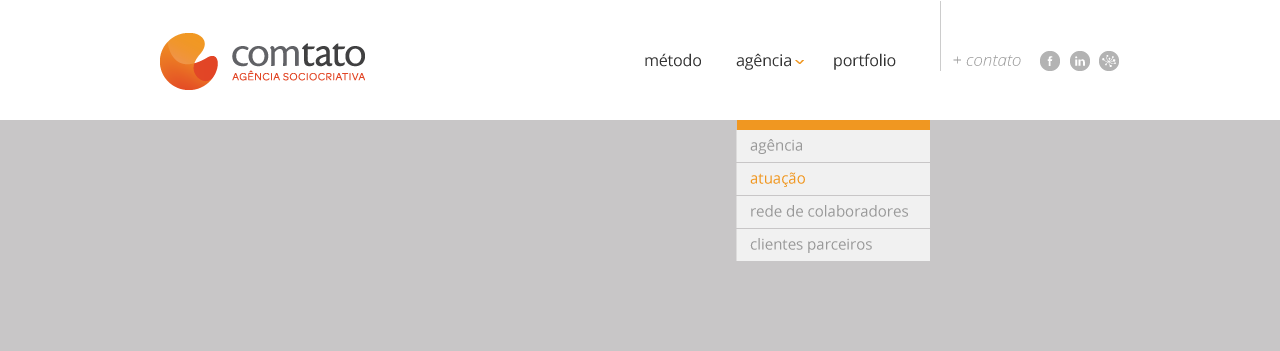
<style>
.page{position:relative;width:1280px;height:351px;background:#c8c6c7}
.page>*{position:absolute;margin:0}
.t1{font:16px "OpenSans";letter-spacing:-0.01em;color:#333333}
.t2{font:15px/33px "OpenSans";color:#999999}
.t3{font:15px/33px "OpenSans";color:#f09721}
</style>
<div class="page">
<p class="t1" style="left:645px;top:53px;width:56px;height:14px">método</p>
<p class="t1" style="left:736px;top:53px;width:55px;height:17px">agência</p>
<p class="t1" style="left:834px;top:53px;width:62px;height:17px">portfolio</p>
<p class="t2" style="left:750px;top:139px;width:158px;height:114px">agência<br><span class="t3">atuação<br></span>rede de colaboradores<br>clientes parceiros</p>
</div>
